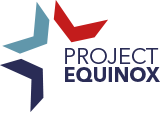
<style>
.page{position:relative;width:160px;height:117px;background:#ffffff}
.page>*{position:absolute;margin:0}
.t1{font:21.8px "AvenirNextLTPro-Regular";color:#2a2c56}
.t2{font:19.9px "AvenirNextLTPro-Bold";color:#2a2c56}
</style>
<div class="page">
<p class="t1" style="left:65px;top:48px;width:94px;height:16px">PROJECT</p>
<p class="t2" style="left:65px;top:67px;width:95px;height:15px">EQUINOX</p>
</div>
